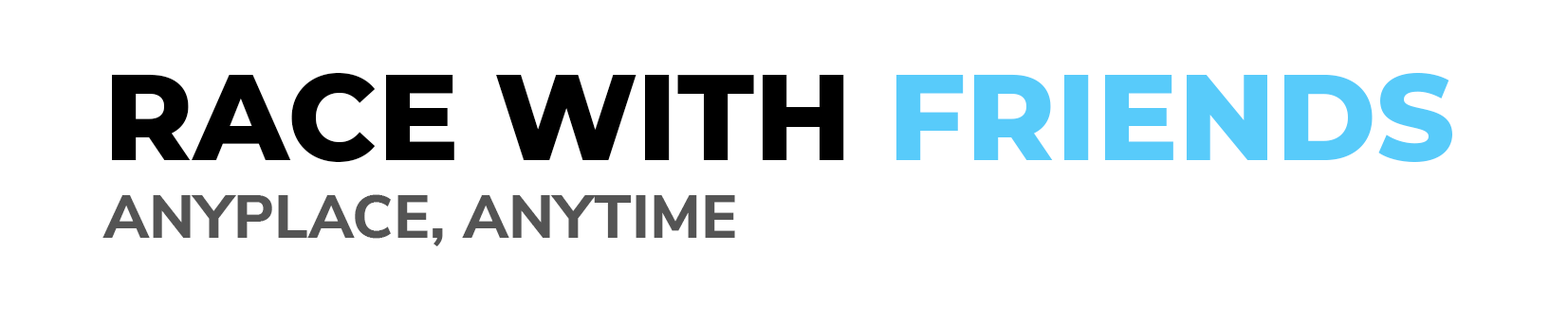
<style>
.page{position:relative;width:1568px;height:324px;background:#ffffff}
.page>*{position:absolute;margin:0}
.t1{font:121.4px "Montserrat-ExtraBold";color:#000000}
.t2{font:121.4px "Montserrat-ExtraBold";color:#58cbfa}
.t3{font:60.7px "NunitoSans-ExtraBold";color:#545454}
</style>
<div class="page">
<p class="t1" style="left:112px;top:72px;width:1340px;height:90px">RACE WITH <span class="t2">FRIENDS</span></p>
<p class="t3" style="left:102px;top:194px;width:633px;height:53px">ANYPLACE, ANYTIME</p>
</div>
